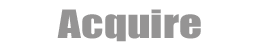
<style>
.page{position:relative;width:256px;height:48px;background:#ffffff}
.page>*{position:absolute;margin:0}
.t1{font:36px "Impact";color:#959494;scale:1.25 1}
</style>
<div class="page">
<p class="t1" style="left:57px;top:9px;width:144px;height:33px">Acquire</p>
</div>
